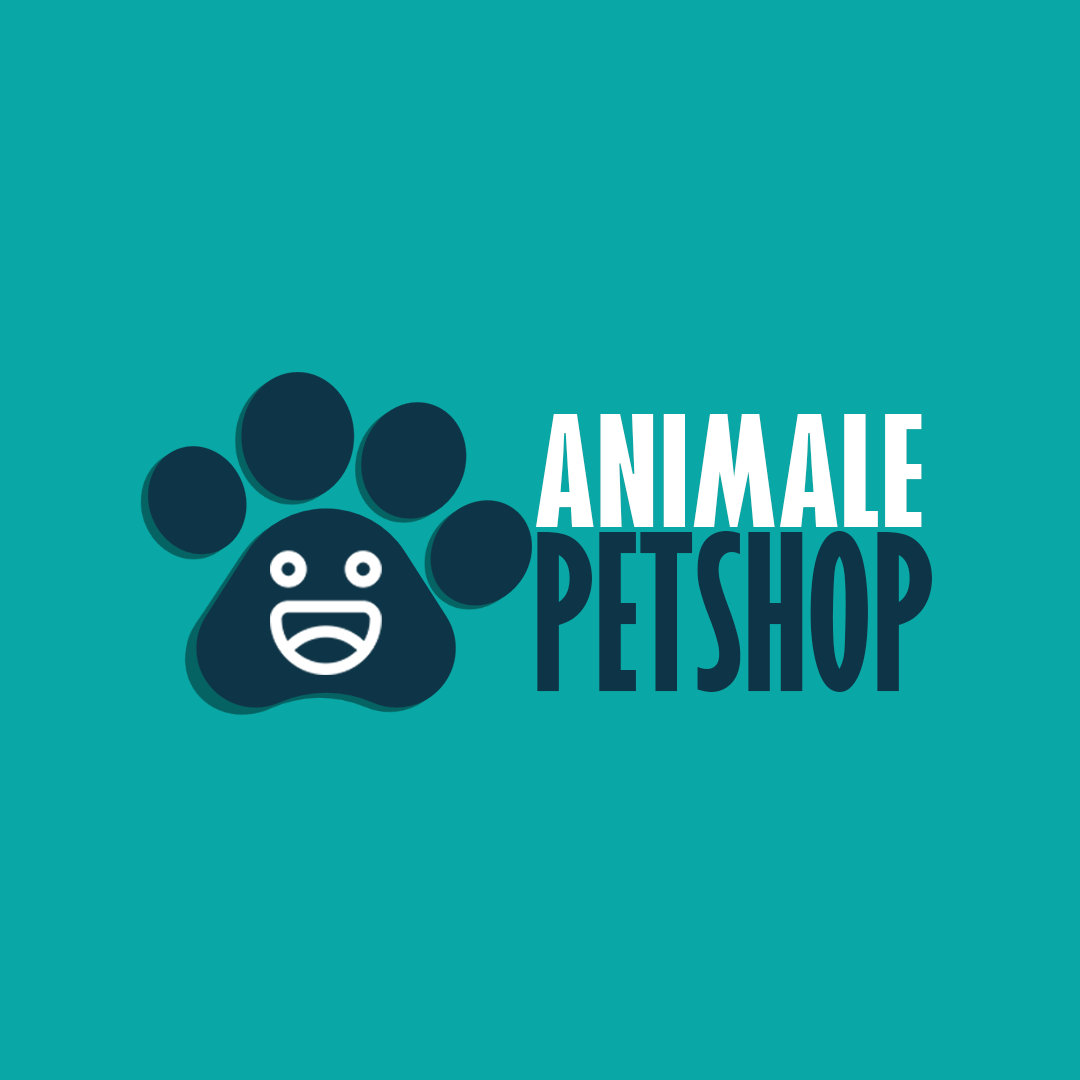
<style>
.page{position:relative;width:1080px;height:1080px;background:#09a7a5}
.page>*{position:absolute;margin:0}
.t1{font:141.7px "GillSansMT-ExtraCondensedBold";color:#ffffff;scale:1.39 1}
.t2{font:200.4px "GillSansMT-ExtraCondensedBold";color:#0e3547}
</style>
<div class="page">
<p class="t1" style="left:536px;top:414px;width:386px;height:113px">ANIMALE</p>
<p class="t2" style="left:537px;top:531px;width:395px;height:161px">PETSHOP</p>
</div>
